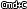
<style>
.page{position:relative;width:27px;height:9px;background:#ffffff}
.page>*{position:absolute;margin:0}
.t1{font:8px "KohinoorBangla-Regular";color:#ffffff}
</style>
<div class="page">
<p class="t1" style="left:1px;top:1px;width:25px;height:7px">Cmd+C</p>
</div>
